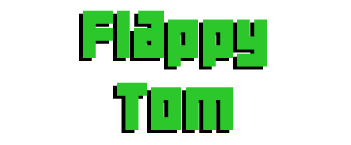
<style>
.page{position:relative;width:351px;height:145px;background:#ffffff}
.page>*{position:absolute;margin:0}
.t1{font:60px "04b19";color:#2bc72b}
</style>
<div class="page">
<p class="t1" style="left:79px;top:13px;width:184px;height:120px;text-align:center">Flappy<br>Tom</p>
<p class="t1" style="left:83px;top:10px;width:184px;height:120px;text-align:center">Flappy<br>Tom</p>
</div>
